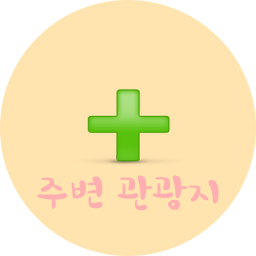
<style>
.page{position:relative;width:256px;height:256px;background:#ffe4af}
.page>*{position:absolute;margin:0}
.t1{font:36px "HoonWhayangR";color:#ffafb0;scale:1.1 1}
</style>
<div class="page">
<p class="t1" style="left:37px;top:175px;width:182px;height:36px">주변 관광지</p>
</div>
